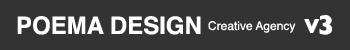
<style>
.page{position:relative;width:350px;height:50px;background:#333333}
.page>*{position:absolute;margin:0}
.t1{font:24px "Helvetica-Bold";color:#ffffff}
.t2{font:28px "GillSans-Bold";color:#ffffff}
.t3{font:12px "Helvetica";color:#ffffff}
.t4{font:20px "GillSans-Bold";color:#ffffff}
</style>
<div class="page">
<p class="t1" style="left:17px;top:16px;width:184px;height:19px">POEMA DESIGN</p>
<p class="t2" style="left:319px;top:15px;width:13px;height:20px">3</p>
<p class="t3" style="left:208px;top:21px;width:88px;height:12px">Creative Agency</p>
<p class="t4" style="left:304px;top:19px;width:16px;height:14px">V</p>
</div>
